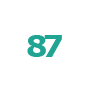
<style>
.page{position:relative;width:90px;height:90px;background:#ffffff}
.page>*{position:absolute;margin:0}
.t1{font:30px "Verdana-Bold";letter-spacing:-0.15em;color:#20a493}
</style>
<div class="page">
<p class="t1" style="left:27px;top:35px;width:35px;height:22px">87</p>
</div>
